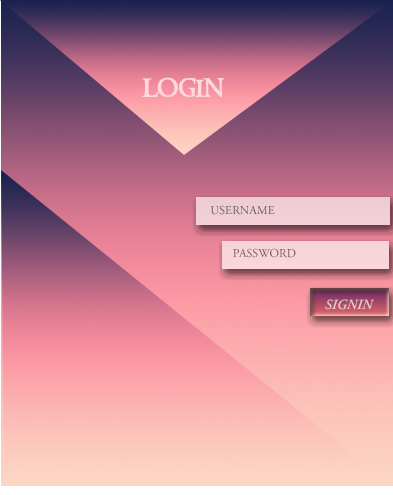
<style>
.page{position:relative;width:393px;height:495px}
.page>*{position:absolute;margin:0}
.t1{font:30px "RingbearerMedium";color:#fcdada}
.t2{font:12px "AGaramond-Regular"}
.t3{font:12px "AGaramond-Regular";color:#645457}
.t4{font:14px "AGaramond-SemiboldItalic";color:#e3cccc}
</style>
<div class="page">
<p class="t1" style="left:142px;top:77px;width:82px;height:20px">login</p>
<p class="t2" style="left:210px;top:205px;width:65px;height:10px">USERNAME</p>
<p class="t3" style="left:233px;top:248px;width:63px;height:10px">PASSWORD</p>
<p class="t4" style="left:325px;top:299px;width:49px;height:11px">SIGNIN</p>
</div>
